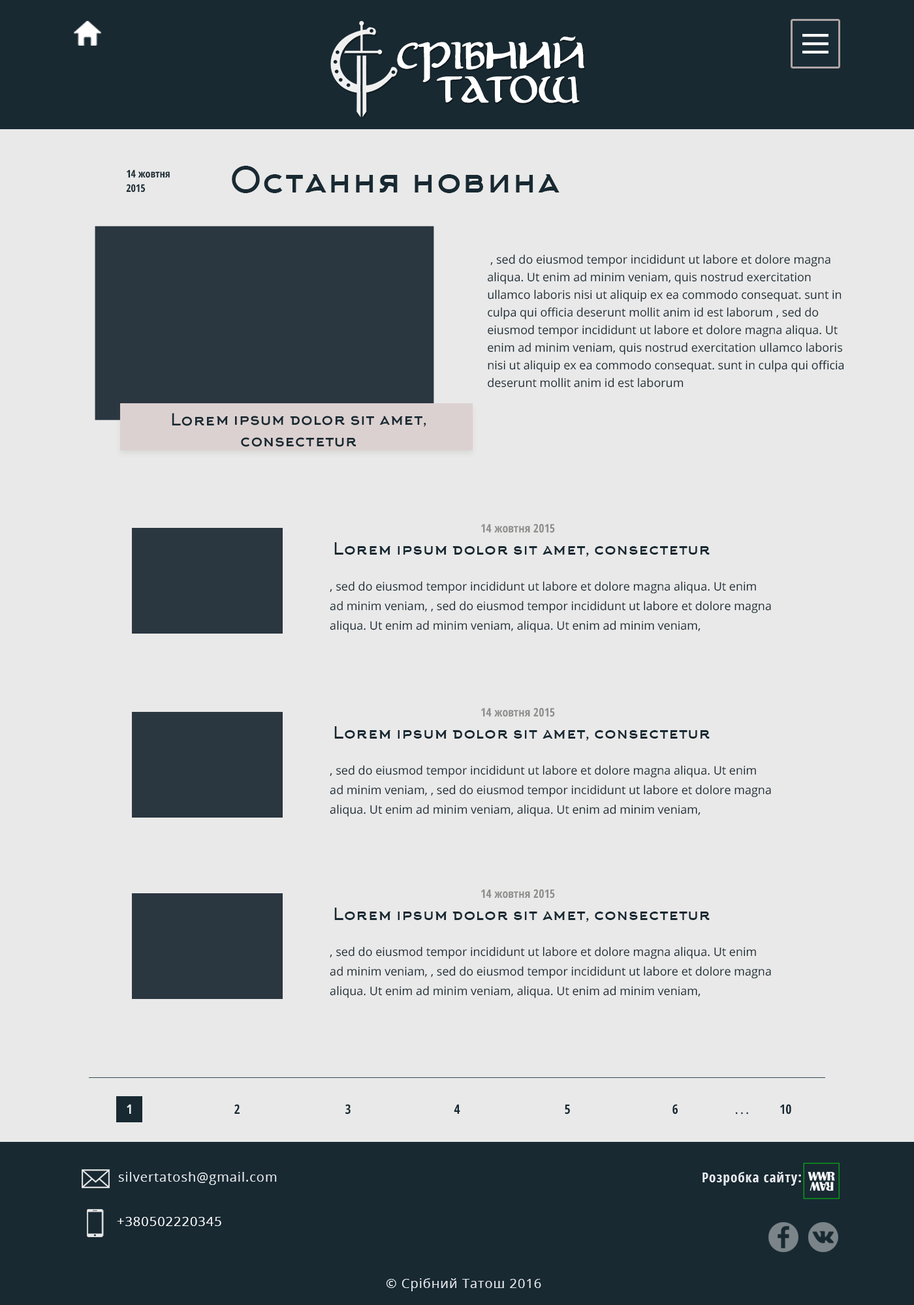
<style>
.page{position:relative;width:914px;height:1305px;background:#e9e9e9}
.page>*{position:absolute;margin:0}
.t1{font:28.2px "Aniron-Bold";letter-spacing:-0.1em;color:#ffffff;text-transform:uppercase;scale:0.9 1}
.t2{font:10.4px/13.8px "OpenSans-CondensedBold";color:#182932}
.t3{font:34.6px "Arkhip";color:#182932}
.t4{font:11.7px/17.6px "OpenSans";color:#182932}
.t5{font:16.3px/21.5px "Arkhip";color:#182932}
.t6{font:11.7px "OpenSans-CondensedBold";color:#8e8e8c}
.t7{font:16.3px "Arkhip";color:#182932}
.t8{font:11.7px/19.6px "OpenSans";color:#182932}
.t9{font:13.1px "OpenSans-CondensedBold";color:#eaeff2}
.t10{font:13.1px "OpenSans-CondensedBold";color:#182932}
.t11{font:10.4px "OpenSans-CondensedBold";color:#182932}
.t12{font:13.1px "OpenSans";letter-spacing:0.05em;color:#e8ebef}
.t13{font:13.7px "OpenSans-CondensedBold";letter-spacing:0.05em;color:#e8ebef}
.t14{font:13.1px "OpenSans";letter-spacing:0.05em;color:#ffffff}
</style>
<div class="page">
<p class="t1" style="left:397px;top:36px;width:187px;height:68px;text-align:center">Срібний   <br>татош</p>
<p class="t2" style="left:126px;top:170px;width:44px;height:23px">14 жовтня <br>2015</p>
<p class="t3" style="left:232px;top:166px;width:327px;height:27px">Остання новина</p>
<p class="t4" style="left:487px;top:255px;width:357px;height:133px">, sed do eiusmod tempor incididunt ut labore et dolore magna aliqua. Ut enim ad minim veniam, quis nostrud exercitation ullamco laboris nisi ut aliquip ex ea commodo consequat. sunt in culpa qui officia deserunt mollit anim id est laborum , sed do eiusmod tempor incididunt ut labore et dolore magna aliqua. Ut enim ad minim veniam, quis nostrud exercitation ullamco laboris nisi ut aliquip ex ea commodo consequat. sunt in culpa qui officia deserunt mollit anim id est laborum</p>
<p class="t5" style="left:172px;top:413px;width:254px;height:34px;text-align:center">Lorem ipsum dolor sit amet, consectetur</p>
<p class="t6" style="left:481px;top:524px;width:74px;height:9px">14 жовтня 2015</p>
<p class="t7" style="left:334px;top:542px;width:375px;height:15px">Lorem ipsum dolor sit amet, consectetur</p>
<p class="t8" style="left:330px;top:581px;width:441px;height:52px">, sed do eiusmod tempor incididunt ut labore et dolore magna aliqua. Ut enim ad minim veniam, , sed do eiusmod tempor incididunt ut labore et dolore magna aliqua. Ut enim ad minim veniam, aliqua. Ut enim ad minim veniam,</p>
<p class="t6" style="left:481px;top:708px;width:74px;height:9px">14 жовтня 2015</p>
<p class="t7" style="left:334px;top:726px;width:375px;height:15px">Lorem ipsum dolor sit amet, consectetur</p>
<p class="t8" style="left:330px;top:765px;width:441px;height:52px">, sed do eiusmod tempor incididunt ut labore et dolore magna aliqua. Ut enim ad minim veniam, , sed do eiusmod tempor incididunt ut labore et dolore magna aliqua. Ut enim ad minim veniam, aliqua. Ut enim ad minim veniam,</p>
<p class="t6" style="left:481px;top:889px;width:74px;height:10px">14 жовтня 2015</p>
<p class="t7" style="left:334px;top:908px;width:375px;height:14px">Lorem ipsum dolor sit amet, consectetur</p>
<p class="t8" style="left:330px;top:947px;width:441px;height:51px">, sed do eiusmod tempor incididunt ut labore et dolore magna aliqua. Ut enim ad minim veniam, , sed do eiusmod tempor incididunt ut labore et dolore magna aliqua. Ut enim ad minim veniam, aliqua. Ut enim ad minim veniam,</p>
<p class="t9" style="left:127px;top:1104px;width:4px;height:10px">1</p>
<p class="t10" style="left:234px;top:1104px;width:5px;height:10px">2</p>
<p class="t10" style="left:345px;top:1104px;width:5px;height:11px">3</p>
<p class="t10" style="left:454px;top:1104px;width:6px;height:10px">4</p>
<p class="t10" style="left:564px;top:1104px;width:6px;height:11px">5</p>
<p class="t10" style="left:672px;top:1104px;width:5px;height:11px">6</p>
<p class="t10" style="left:780px;top:1104px;width:11px;height:11px">10</p>
<p class="t11" style="left:735px;top:1112px;width:13px;height:3px">. . .</p>
<p class="t12" style="left:118px;top:1172px;width:159px;height:13px">silvertatosh@gmail.com</p>
<p class="t13" style="left:702px;top:1172px;width:99px;height:14px">Розробка сайту:</p>
<p class="t14" style="left:117px;top:1217px;width:104px;height:9px">+380502220345</p>
<p class="t12" style="left:386px;top:1278px;width:155px;height:13px">© Срібний Татош 2016</p>
</div>
